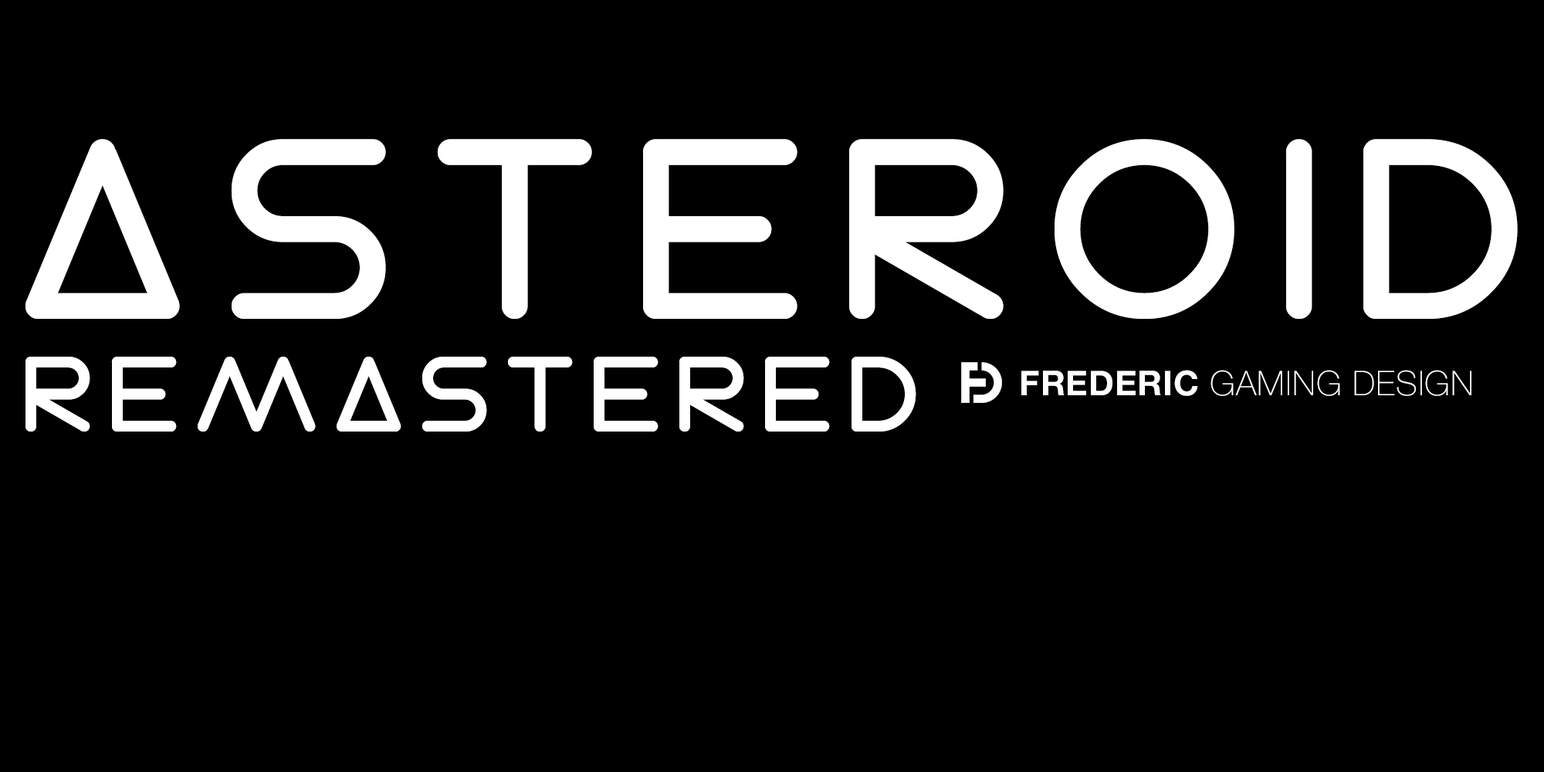
<style>
.page{position:relative;width:1544px;height:772px;background:#000000}
.page>*{position:absolute;margin:0}
.t1{font:262.7px "ElectroShackle";letter-spacing:0.1em;color:#ffffff;text-transform:uppercase}
.t2{font:109.4px "ElectroShackle";letter-spacing:0.1em;color:#ffffff;text-transform:uppercase}
.t3{font:34.3px "HelveticaNeue-Thin";letter-spacing:0.02em;color:#ffffff;text-transform:uppercase}
.t4{font:34.3px "HelveticaNeue-Bold";letter-spacing:0.02em;color:#ffffff;text-transform:uppercase}
</style>
<div class="page">
<p class="t1" style="left:25px;top:139px;width:1493px;height:180px">ASTEROID</p>
<p class="t2" style="left:25px;top:357px;width:892px;height:75px">REMASTERED</p>
<p class="t3" style="left:1022px;top:370px;width:450px;height:26px"><span class="t4">FrederiC</span> GAMING DESIGN</p>
</div>
